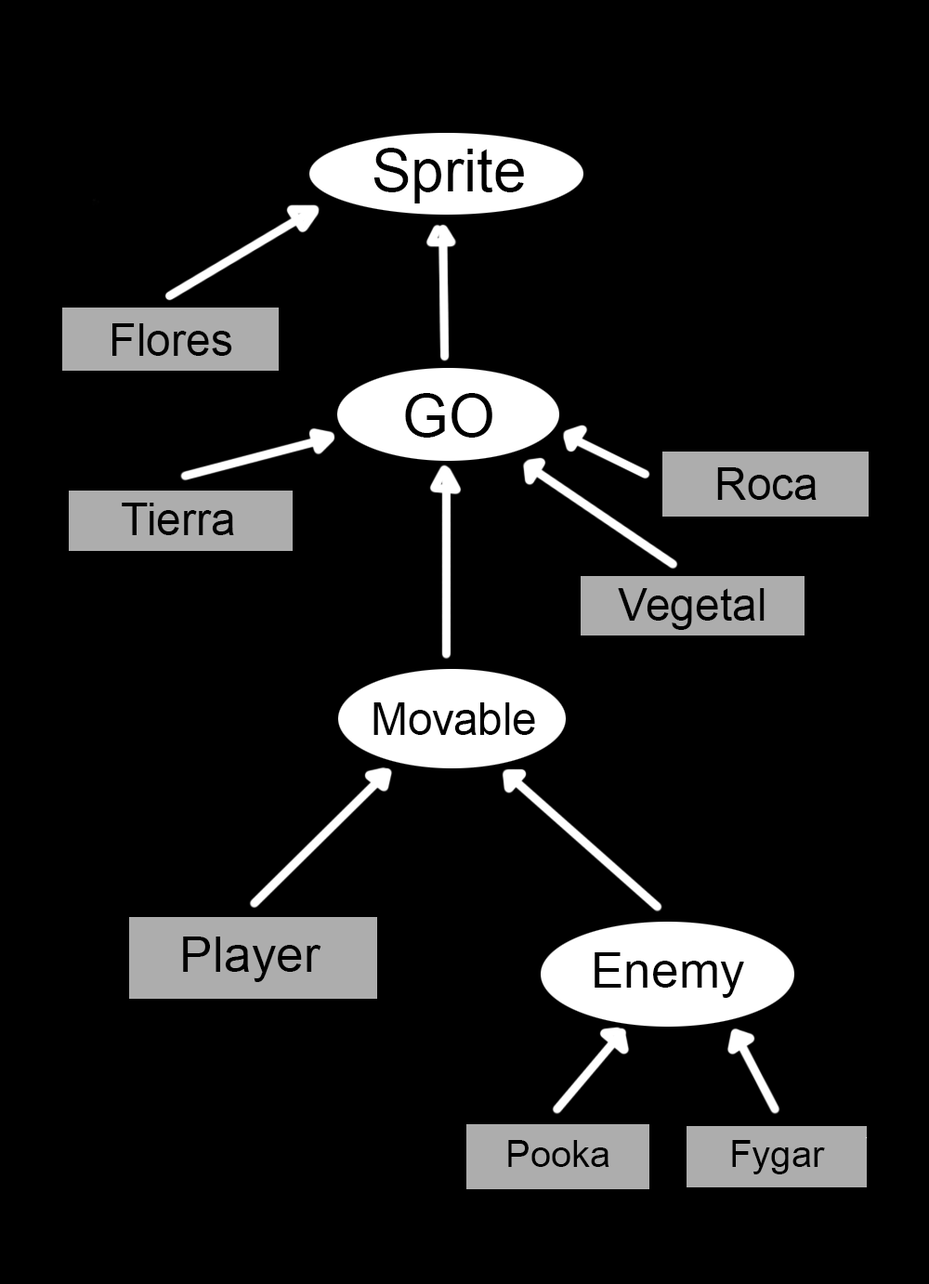
<style>
.page{position:relative;width:929px;height:1284px;background:#000000}
.page>*{position:absolute;margin:0}
.t1{font:59.5px "ArialMT";color:#000000}
.t2{font:44.6px "ArialMT";color:#000000}
.t3{font:49.5px "ArialMT";color:#000000}
.t4{font:37.2px "ArialMT";color:#000000}
</style>
<div class="page">
<p class="t1" style="left:373px;top:148px;width:151px;height:55px">Sprite</p>
<p class="t2" style="left:112px;top:323px;width:120px;height:33px">Flores</p>
<p class="t1" style="left:405px;top:393px;width:87px;height:45px">GO</p>
<p class="t2" style="left:717px;top:467px;width:99px;height:33px">Roca</p>
<p class="t2" style="left:122px;top:503px;width:112px;height:32px">Tierra</p>
<p class="t2" style="left:618px;top:588px;width:146px;height:42px">Vegetal</p>
<p class="t2" style="left:373px;top:702px;width:162px;height:33px">Movable</p>
<p class="t3" style="left:183px;top:936px;width:138px;height:46px">Player</p>
<p class="t3" style="left:594px;top:952px;width:150px;height:46px">Enemy</p>
<p class="t4" style="left:508px;top:1140px;width:101px;height:27px">Pooka</p>
<p class="t4" style="left:732px;top:1140px;width:93px;height:34px">Fygar</p>
</div>
